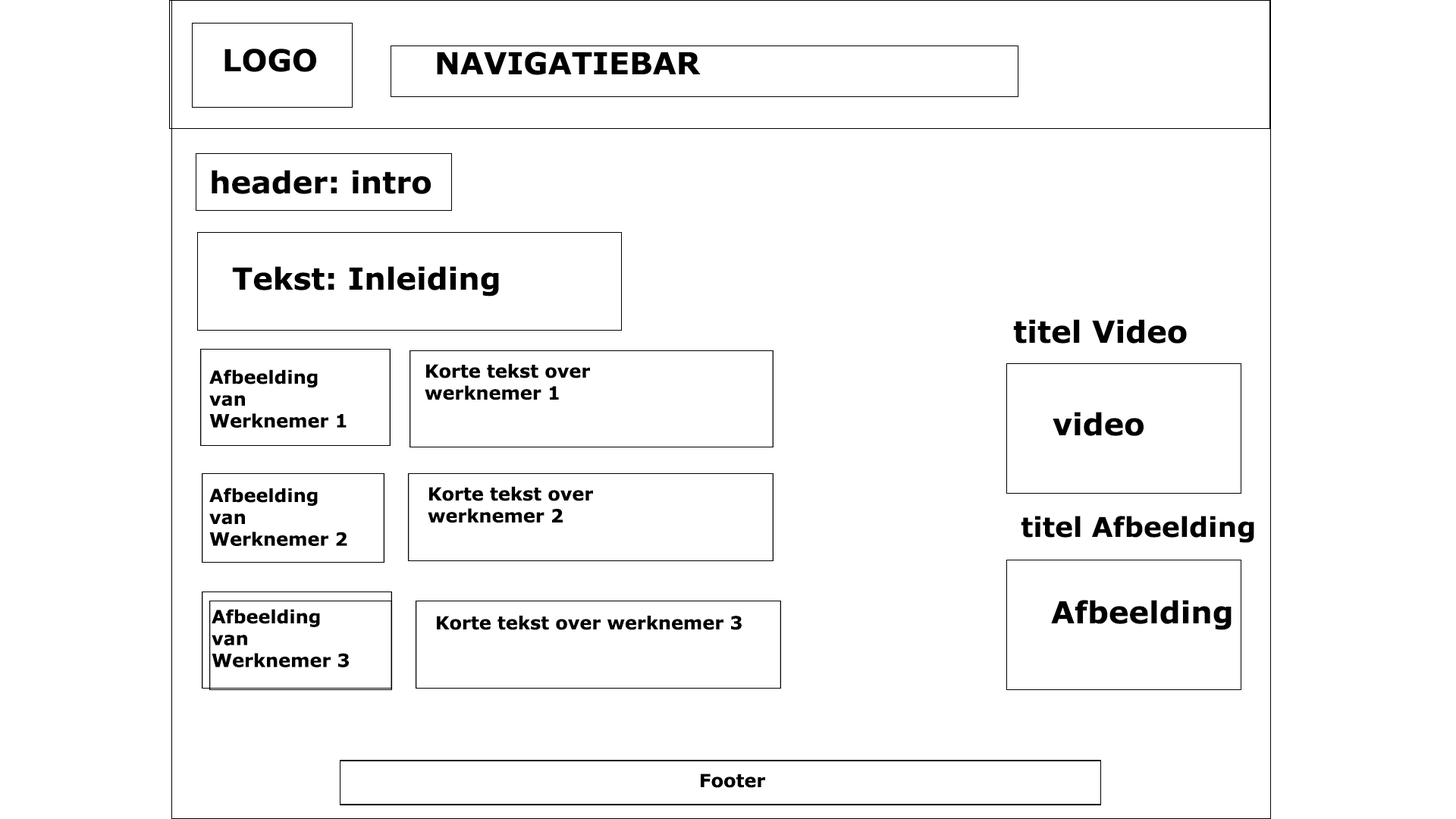
<style>
.page{position:relative;width:1456px;height:819px;background:#ffffff}
.page>*{position:absolute;margin:0}
.t1{font:30.3px "Verdana-Bold";color:#000000}
.t2{font:18.2px "Verdana-Bold";color:#000000}
.t3{font:27.3px "Verdana-Bold";color:#000000}
</style>
<div class="page">
<p class="t1" style="left:224px;top:49px;width:92px;height:23px">LOGO</p>
<p class="t1" style="left:437px;top:52px;width:264px;height:23px">NAVIGATIEBAR</p>
<p class="t1" style="left:212px;top:170px;width:219px;height:24px">header: intro</p>
<p class="t1" style="left:232px;top:266px;width:267px;height:31px">Tekst: Inleiding</p>
<p class="t1" style="left:1013px;top:319px;width:174px;height:25px">titel Video</p>
<p class="t2" style="left:425px;top:363px;width:165px;height:37px">Korte tekst over <br>werknemer 1</p>
<p class="t2" style="left:209px;top:369px;width:138px;height:59px">Afbeelding <br>van <br>Werknemer 1</p>
<p class="t1" style="left:1053px;top:412px;width:91px;height:24px">video</p>
<p class="t2" style="left:209px;top:488px;width:138px;height:58px">Afbeelding <br>van <br>Werknemer 2</p>
<p class="t2" style="left:428px;top:486px;width:165px;height:37px">Korte tekst over<br>werknemer 2</p>
<p class="t3" style="left:1021px;top:516px;width:233px;height:27px">titel Afbeelding</p>
<p class="t1" style="left:1051px;top:600px;width:181px;height:30px">Afbeelding</p>
<p class="t2" style="left:212px;top:609px;width:137px;height:58px">Afbeelding <br>van <br>Werknemer 3</p>
<p class="t2" style="left:437px;top:615px;width:305px;height:15px">Korte tekst over werknemer 3</p>
<p class="t2" style="left:701px;top:773px;width:64px;height:15px">Footer</p>
</div>
